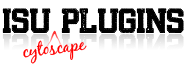
<style>
.page{position:relative;width:186px;height:72px;background:#ffffff}
.page>*{position:absolute;margin:0}
.t1{font:36px "BandungHardcoreGP";color:#000000}
.t2{font:36px "BandungHardcoreGP"}
.t3{font:18px "BlackJackRegular";color:#ff0000}
</style>
<div class="page">
<p class="t1" style="left:2px;top:8px;width:182px;height:25px">ISU Plugins</p>
<p class="t2" style="left:2px;top:34px;width:182px;height:25px">ISU Plugins</p>
<p class="t3" style="left:23px;top:40px;width:64px;height:24px;rotate:-6deg">cytoscape</p>
</div>
